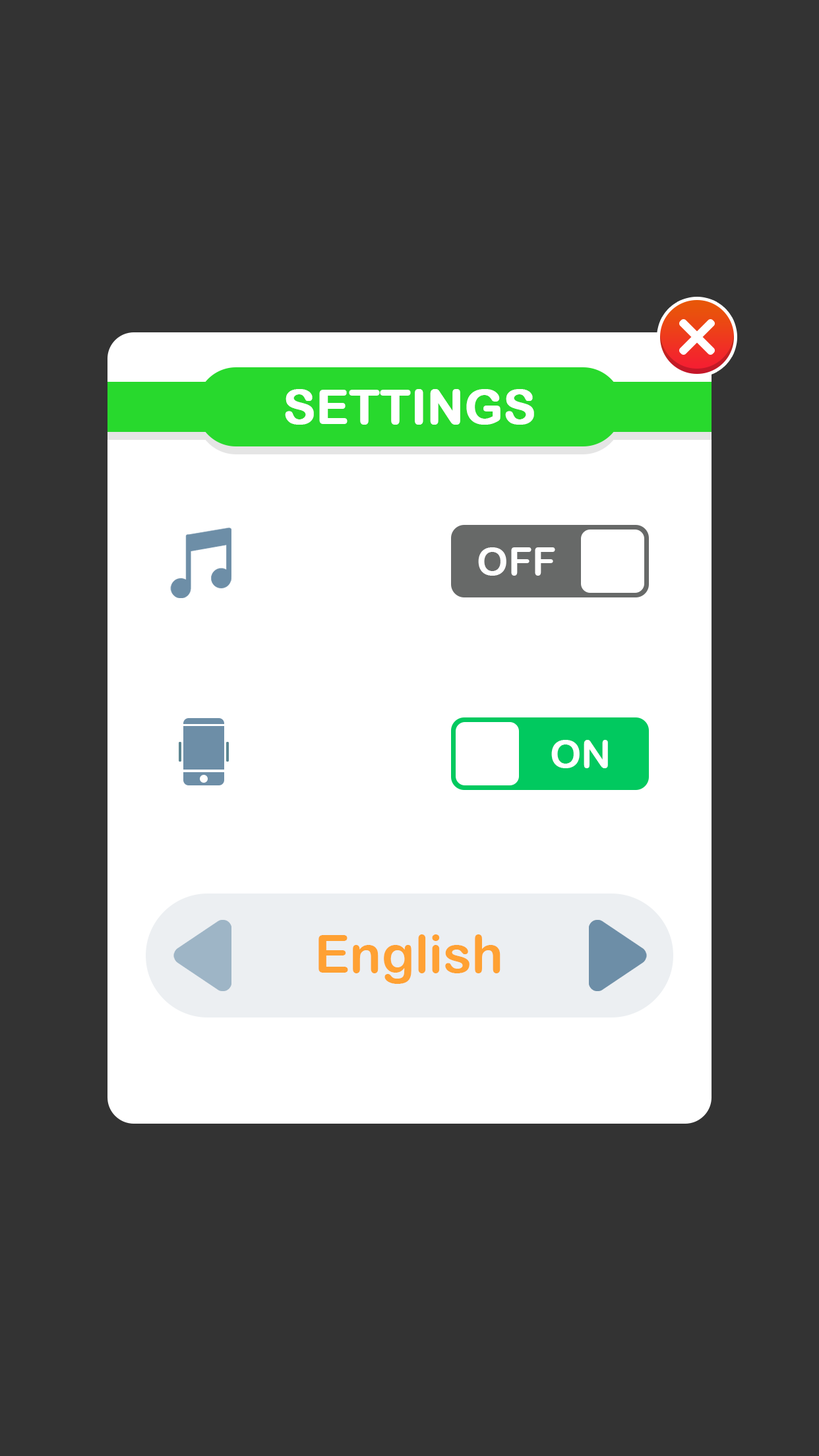
<style>
.page{position:relative;width:819px;height:1456px;background:#333333}
.page>*{position:absolute;margin:0}
.t1{font:47.5px "ArialRoundedMTBold";color:#ffffff;font-weight:bold}
.t2{font:39.6px "ArialRoundedMTBold";color:#ffffff}
.t3{font:52.8px "ArialRoundedMTBold";color:#ffa133}
</style>
<div class="page">
<p class="t1" style="left:285px;top:389px;width:249px;height:36px">SETTINGS</p>
<p class="t2" style="left:478px;top:547px;width:77px;height:29px">OFF</p>
<p class="t2" style="left:551px;top:740px;width:57px;height:28px">ON</p>
<p class="t3" style="left:318px;top:934px;width:182px;height:50px">English</p>
</div>
